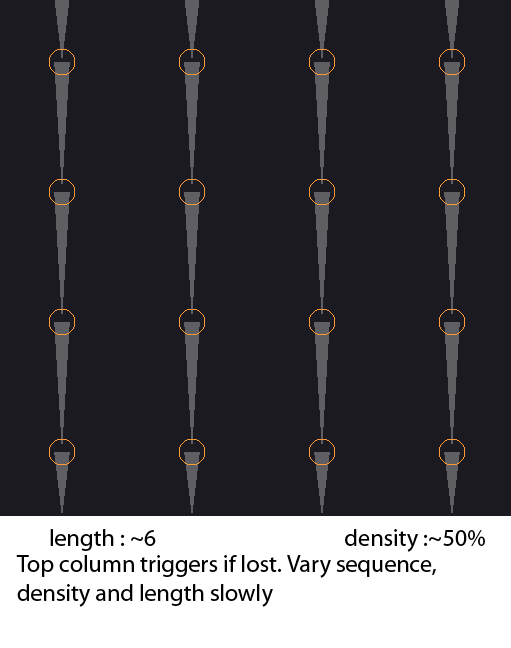
<style>
.page{position:relative;width:511px;height:648px;background:#1a1a20}
.page>*{position:absolute;margin:0}
.t1{font:24px "MyriadPro-Regular";color:#000000}
</style>
<div class="page">
<p class="t1" style="left:50px;top:529px;width:435px;height:23px">length : ~6                                     density :~50%</p>
<p class="t1" style="left:16px;top:555px;width:420px;height:52px">Top column triggers if lost. Vary sequence, <br>density and length slowly</p>
</div>
